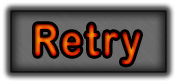
<style>
.page{position:relative;width:178px;height:84px}
.page>*{position:absolute;margin:0}
.t1{font:43.2px "ArialRoundedMTBold";letter-spacing:0.1em;scale:0.83 1}
</style>
<div class="page">
<p class="t1" style="left:35px;top:24px;width:105px;height:41px">Retry</p>
</div>
